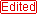
<style>
.page{position:relative;width:37px;height:14px;background:#ffffff}
.page>*{position:absolute;margin:0}
.t1{font:12px "ArialMT";color:#df0000}
</style>
<div class="page">
<p class="t1" style="left:1px;top:1px;width:35px;height:14px">Edited</p>
</div>
